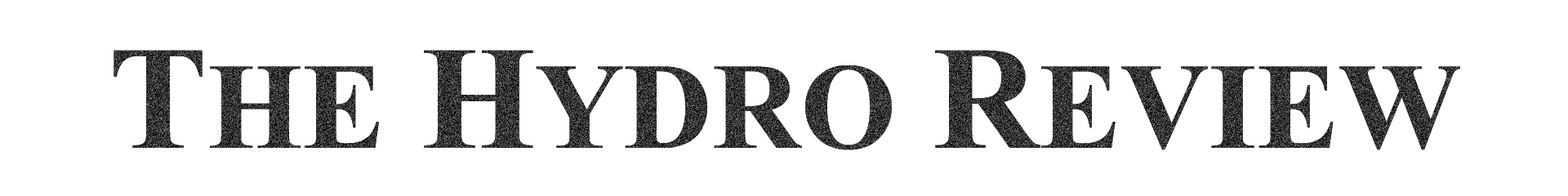
<style>
.page{position:relative;width:1568px;height:196px;background:#ffffff}
.page>*{position:absolute;margin:0}
.t1{font:122.5px "TimesNewRomanPS-BoldMT"}
.t2{font:147px "TimesNewRomanPS-BoldMT"}
</style>
<div class="page">
<p class="t1" style="left:114px;top:50px;width:1346px;height:100px"><span class="t2">T</span>HE<span class="t2"> H</span>YDRO<span class="t2"> R</span>EVIEW</p>
</div>
